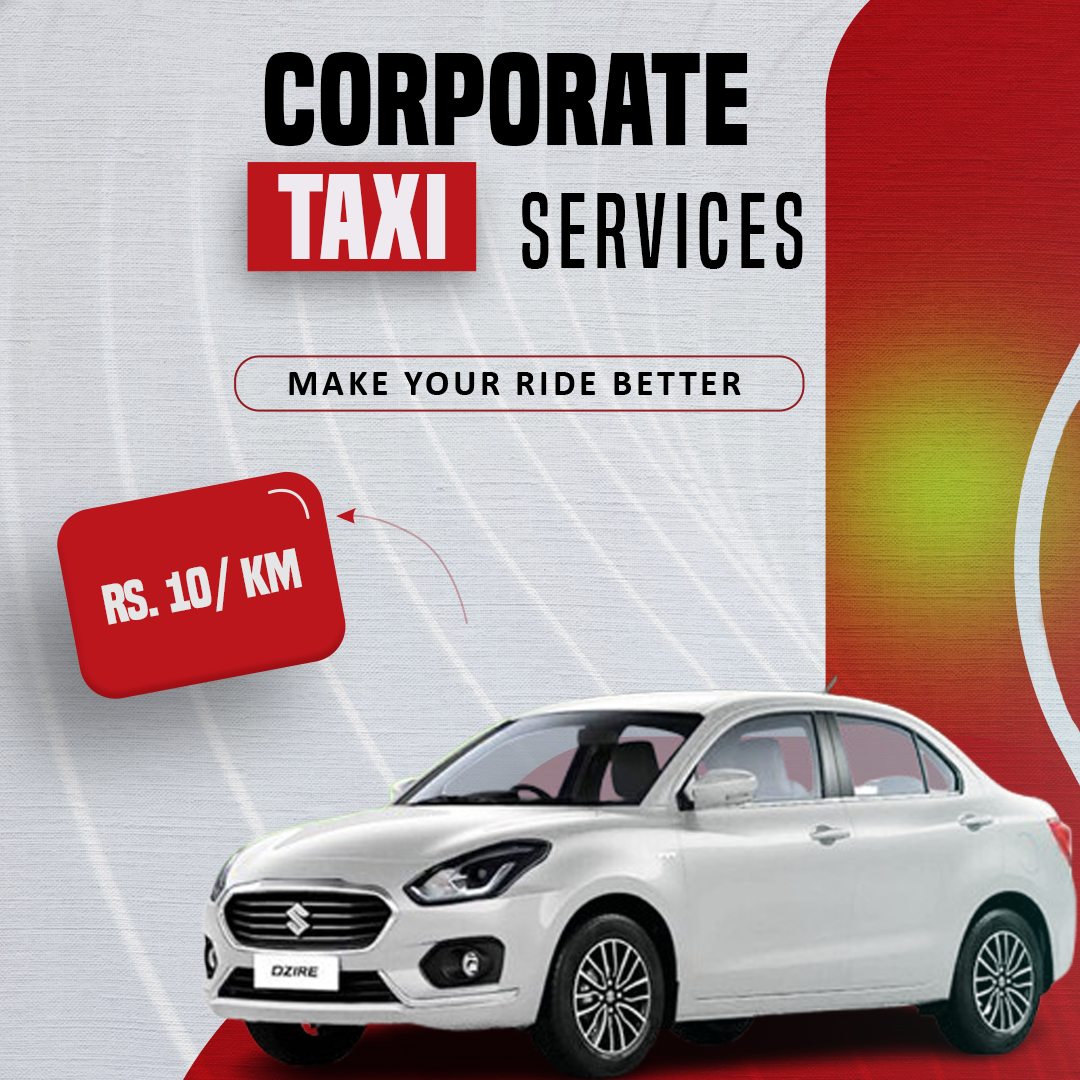
<style>
.page{position:relative;width:1080px;height:1080px}
.page>*{position:absolute;margin:0}
.t1{font:122.4px "BuiltTitlingRg-Bold";letter-spacing:0.005em;color:#000000;text-transform:uppercase}
.t2{font:112.3px "BuiltTitlingRg-Bold";letter-spacing:0.005em;color:#eeeaef;text-transform:uppercase}
.t3{font:98.7px "BuiltTitlingRg-Regular";letter-spacing:0.075em;color:#000000;text-transform:uppercase}
.t4{font:52px "BuiltTitlingRg-Bold";letter-spacing:-0.01em;color:#e5e5e5;text-transform:uppercase}
</style>
<div class="page">
<p class="t1" style="left:264px;top:52px;width:484px;height:94px">Corporate</p>
<p class="t2" style="left:278px;top:174px;width:168px;height:85px">TAXi</p>
<p class="t3" style="left:522px;top:192px;width:281px;height:77px">SERVICES</p>
<p class="t4" style="left:101px;top:548px;width:202px;height:77px;rotate:-11deg">RS. 10/ KM</p>
</div>
